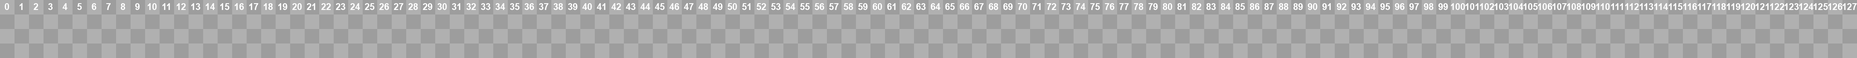
<style>
.page{position:relative;width:1857px;height:58px}
.page>*{position:absolute;margin:0}
.t1{font:9px "Arial-BoldMT";color:#ffffff}
</style>
<div class="page">
<p class="t1" style="left:5px;top:3px;width:4px;height:7px">0</p>
<p class="t1" style="left:19px;top:3px;width:4px;height:7px">1</p>
<p class="t1" style="left:34px;top:3px;width:4px;height:7px">2</p>
<p class="t1" style="left:48px;top:3px;width:5px;height:7px">3</p>
<p class="t1" style="left:63px;top:3px;width:5px;height:7px">4</p>
<p class="t1" style="left:77px;top:3px;width:5px;height:7px">5</p>
<p class="t1" style="left:92px;top:3px;width:5px;height:7px">6</p>
<p class="t1" style="left:106px;top:3px;width:5px;height:7px">7</p>
<p class="t1" style="left:121px;top:3px;width:4px;height:7px">8</p>
<p class="t1" style="left:135px;top:3px;width:5px;height:7px">9</p>
<p class="t1" style="left:147px;top:3px;width:10px;height:7px">10</p>
<p class="t1" style="left:162px;top:3px;width:8px;height:7px">11</p>
<p class="t1" style="left:176px;top:3px;width:10px;height:7px">12</p>
<p class="t1" style="left:191px;top:3px;width:9px;height:7px">13</p>
<p class="t1" style="left:205px;top:3px;width:10px;height:7px">14</p>
<p class="t1" style="left:220px;top:3px;width:9px;height:7px">15</p>
<p class="t1" style="left:234px;top:3px;width:10px;height:7px">16</p>
<p class="t1" style="left:249px;top:3px;width:9px;height:7px">17</p>
<p class="t1" style="left:263px;top:3px;width:10px;height:7px">18</p>
<p class="t1" style="left:278px;top:3px;width:9px;height:7px">19</p>
<p class="t1" style="left:292px;top:3px;width:10px;height:7px">20</p>
<p class="t1" style="left:307px;top:3px;width:9px;height:7px">21</p>
<p class="t1" style="left:321px;top:3px;width:10px;height:7px">22</p>
<p class="t1" style="left:336px;top:3px;width:9px;height:7px">23</p>
<p class="t1" style="left:350px;top:3px;width:10px;height:7px">24</p>
<p class="t1" style="left:365px;top:3px;width:10px;height:7px">25</p>
<p class="t1" style="left:379px;top:3px;width:10px;height:7px">26</p>
<p class="t1" style="left:394px;top:3px;width:10px;height:7px">27</p>
<p class="t1" style="left:408px;top:3px;width:10px;height:7px">28</p>
<p class="t1" style="left:423px;top:3px;width:10px;height:7px">29</p>
<p class="t1" style="left:438px;top:3px;width:9px;height:7px">30</p>
<p class="t1" style="left:452px;top:3px;width:9px;height:7px">31</p>
<p class="t1" style="left:467px;top:3px;width:9px;height:7px">32</p>
<p class="t1" style="left:481px;top:3px;width:10px;height:7px">33</p>
<p class="t1" style="left:496px;top:3px;width:9px;height:7px">34</p>
<p class="t1" style="left:510px;top:3px;width:10px;height:7px">35</p>
<p class="t1" style="left:525px;top:3px;width:9px;height:7px">36</p>
<p class="t1" style="left:539px;top:3px;width:10px;height:7px">37</p>
<p class="t1" style="left:554px;top:3px;width:9px;height:7px">38</p>
<p class="t1" style="left:568px;top:3px;width:10px;height:7px">39</p>
<p class="t1" style="left:582px;top:3px;width:10px;height:7px">40</p>
<p class="t1" style="left:597px;top:3px;width:9px;height:7px">41</p>
<p class="t1" style="left:611px;top:3px;width:10px;height:7px">42</p>
<p class="t1" style="left:626px;top:3px;width:10px;height:7px">43</p>
<p class="t1" style="left:640px;top:3px;width:10px;height:7px">44</p>
<p class="t1" style="left:655px;top:3px;width:10px;height:7px">45</p>
<p class="t1" style="left:669px;top:3px;width:10px;height:7px">46</p>
<p class="t1" style="left:684px;top:3px;width:10px;height:7px">47</p>
<p class="t1" style="left:698px;top:3px;width:10px;height:7px">48</p>
<p class="t1" style="left:713px;top:3px;width:10px;height:7px">49</p>
<p class="t1" style="left:728px;top:3px;width:9px;height:7px">50</p>
<p class="t1" style="left:742px;top:3px;width:9px;height:7px">51</p>
<p class="t1" style="left:757px;top:3px;width:9px;height:7px">52</p>
<p class="t1" style="left:771px;top:3px;width:10px;height:7px">53</p>
<p class="t1" style="left:786px;top:3px;width:9px;height:7px">54</p>
<p class="t1" style="left:800px;top:3px;width:10px;height:7px">55</p>
<p class="t1" style="left:815px;top:3px;width:9px;height:7px">56</p>
<p class="t1" style="left:829px;top:3px;width:10px;height:7px">57</p>
<p class="t1" style="left:844px;top:3px;width:9px;height:7px">58</p>
<p class="t1" style="left:858px;top:3px;width:10px;height:7px">59</p>
<p class="t1" style="left:873px;top:3px;width:9px;height:7px">60</p>
<p class="t1" style="left:887px;top:3px;width:9px;height:7px">61</p>
<p class="t1" style="left:902px;top:3px;width:9px;height:7px">62</p>
<p class="t1" style="left:916px;top:3px;width:10px;height:7px">63</p>
<p class="t1" style="left:931px;top:3px;width:9px;height:7px">64</p>
<p class="t1" style="left:945px;top:3px;width:10px;height:7px">65</p>
<p class="t1" style="left:960px;top:3px;width:9px;height:7px">66</p>
<p class="t1" style="left:974px;top:3px;width:10px;height:7px">67</p>
<p class="t1" style="left:989px;top:3px;width:9px;height:7px">68</p>
<p class="t1" style="left:1003px;top:3px;width:10px;height:7px">69</p>
<p class="t1" style="left:1018px;top:3px;width:9px;height:7px">70</p>
<p class="t1" style="left:1032px;top:3px;width:9px;height:7px">71</p>
<p class="t1" style="left:1047px;top:3px;width:9px;height:7px">72</p>
<p class="t1" style="left:1061px;top:3px;width:10px;height:7px">73</p>
<p class="t1" style="left:1076px;top:3px;width:9px;height:7px">74</p>
<p class="t1" style="left:1090px;top:3px;width:10px;height:7px">75</p>
<p class="t1" style="left:1105px;top:3px;width:9px;height:7px">76</p>
<p class="t1" style="left:1119px;top:3px;width:10px;height:7px">77</p>
<p class="t1" style="left:1134px;top:3px;width:9px;height:7px">78</p>
<p class="t1" style="left:1148px;top:3px;width:10px;height:7px">79</p>
<p class="t1" style="left:1163px;top:3px;width:10px;height:7px">80</p>
<p class="t1" style="left:1177px;top:3px;width:9px;height:7px">81</p>
<p class="t1" style="left:1192px;top:3px;width:10px;height:7px">82</p>
<p class="t1" style="left:1207px;top:3px;width:9px;height:7px">83</p>
<p class="t1" style="left:1221px;top:3px;width:10px;height:7px">84</p>
<p class="t1" style="left:1236px;top:3px;width:9px;height:7px">85</p>
<p class="t1" style="left:1250px;top:3px;width:10px;height:7px">86</p>
<p class="t1" style="left:1265px;top:3px;width:9px;height:7px">87</p>
<p class="t1" style="left:1279px;top:3px;width:10px;height:7px">88</p>
<p class="t1" style="left:1294px;top:3px;width:9px;height:7px">89</p>
<p class="t1" style="left:1308px;top:3px;width:10px;height:7px">90</p>
<p class="t1" style="left:1322px;top:3px;width:9px;height:7px">91</p>
<p class="t1" style="left:1337px;top:3px;width:10px;height:7px">92</p>
<p class="t1" style="left:1351px;top:3px;width:10px;height:7px">93</p>
<p class="t1" style="left:1366px;top:3px;width:10px;height:7px">94</p>
<p class="t1" style="left:1380px;top:3px;width:10px;height:7px">95</p>
<p class="t1" style="left:1395px;top:3px;width:10px;height:7px">96</p>
<p class="t1" style="left:1409px;top:3px;width:10px;height:7px">97</p>
<p class="t1" style="left:1424px;top:3px;width:10px;height:7px">98</p>
<p class="t1" style="left:1438px;top:3px;width:10px;height:7px">99</p>
<p class="t1" style="left:1451px;top:3px;width:14px;height:7px">100</p>
<p class="t1" style="left:1465px;top:3px;width:14px;height:7px">101</p>
<p class="t1" style="left:1480px;top:3px;width:14px;height:7px">102</p>
<p class="t1" style="left:1494px;top:3px;width:15px;height:7px">103</p>
<p class="t1" style="left:1509px;top:3px;width:14px;height:7px">104</p>
<p class="t1" style="left:1523px;top:3px;width:15px;height:7px">105</p>
<p class="t1" style="left:1538px;top:3px;width:14px;height:7px">106</p>
<p class="t1" style="left:1552px;top:3px;width:15px;height:7px">107</p>
<p class="t1" style="left:1567px;top:3px;width:14px;height:7px">108</p>
<p class="t1" style="left:1581px;top:3px;width:15px;height:7px">109</p>
<p class="t1" style="left:1596px;top:3px;width:14px;height:7px">110</p>
<p class="t1" style="left:1611px;top:3px;width:12px;height:7px">111</p>
<p class="t1" style="left:1625px;top:3px;width:14px;height:7px">112</p>
<p class="t1" style="left:1640px;top:3px;width:14px;height:7px">113</p>
<p class="t1" style="left:1654px;top:3px;width:14px;height:7px">114</p>
<p class="t1" style="left:1669px;top:3px;width:14px;height:7px">115</p>
<p class="t1" style="left:1683px;top:3px;width:14px;height:7px">116</p>
<p class="t1" style="left:1698px;top:3px;width:14px;height:7px">117</p>
<p class="t1" style="left:1712px;top:3px;width:14px;height:7px">118</p>
<p class="t1" style="left:1727px;top:3px;width:14px;height:7px">119</p>
<p class="t1" style="left:1741px;top:3px;width:15px;height:7px">120</p>
<p class="t1" style="left:1756px;top:3px;width:13px;height:7px">121</p>
<p class="t1" style="left:1770px;top:3px;width:15px;height:7px">122</p>
<p class="t1" style="left:1785px;top:3px;width:14px;height:7px">123</p>
<p class="t1" style="left:1799px;top:3px;width:15px;height:7px">124</p>
<p class="t1" style="left:1814px;top:3px;width:14px;height:7px">125</p>
<p class="t1" style="left:1828px;top:3px;width:15px;height:7px">126</p>
<p class="t1" style="left:1843px;top:3px;width:14px;height:7px">127</p>
</div>
